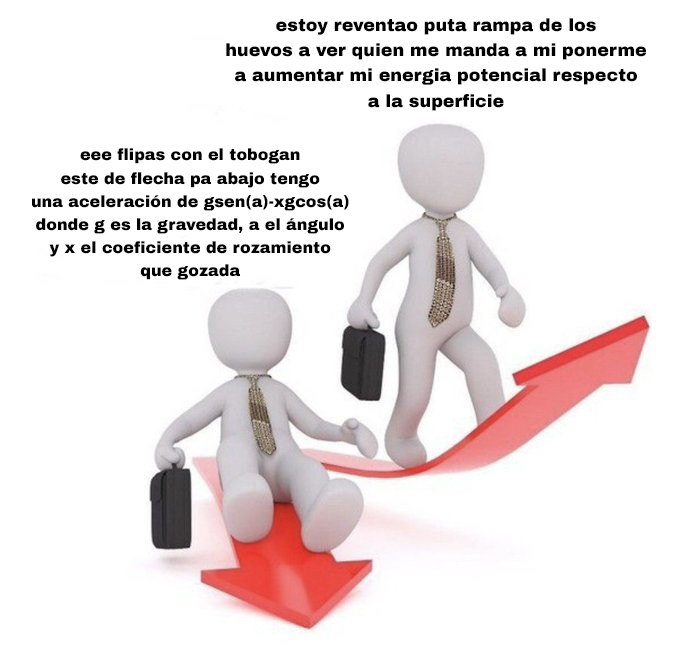
<style>
.page{position:relative;width:680px;height:646px;background:#ffffff}
.page>*{position:absolute;margin:0}
.t1{font:17.5px "ArchivoBlack-Regular";color:#000000}
.t2{font:16px "ArchivoBlack-Regular";color:#000000}
</style>
<div class="page">
<p class="t1" style="left:226px;top:18px;width:420px;height:93px;text-align:center">estoy reventao puta rampa de los<br>huevos a ver quien me manda a mi ponerme<br>a aumentar mi energia potencial respecto<br>a la superficie</p>
<p class="t2" style="left:32px;top:148px;width:317px;height:132px;text-align:center">eee flipas con el tobogan<br>este de flecha pa abajo tengo<br>una aceleración de gsen(a)-xgcos(a)<br>donde g es la gravedad, a el ángulo<br>y x el coeficiente de rozamiento<br>que gozada</p>
</div>
